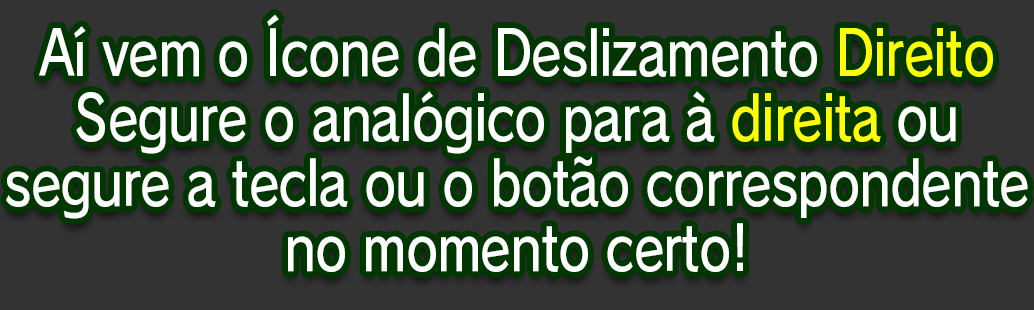
<style>
.page{position:relative;width:1034px;height:310px;background:#333333}
.page>*{position:absolute;margin:0}
.t1{font:61.3px/65.2px "RodinPro-DB";letter-spacing:-0.022em;color:#ffffff;scale:0.83 1}
.t2{font:61.3px/65.2px "RodinPro-DB";letter-spacing:-0.022em;color:#fcff05;scale:0.83 1}
</style>
<div class="page">
<p class="t1" style="left:6px;top:14px;width:1022px;height:258px;text-align:center">Aí vem o Ícone de Deslizamento <span class="t2">Direito<br></span>Segure o analógico para à <span class="t2">direita</span> ou<br>segure a tecla ou o botão correspondente<br>no momento certo!</p>
</div>
